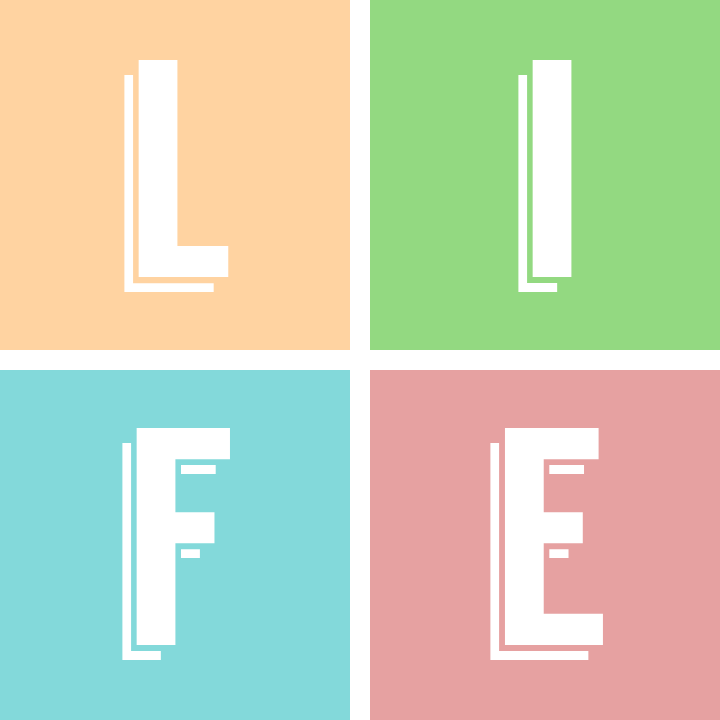
<style>
.page{position:relative;width:720px;height:720px;background:#93d981}
.page>*{position:absolute;margin:0}
.t1{font:310px "Langdon";color:#ffffff}
</style>
<div class="page">
<p class="t1" style="left:124px;top:60px;width:105px;height:232px">l</p>
<p class="t1" style="left:518px;top:60px;width:54px;height:232px">i</p>
<p class="t1" style="left:122px;top:427px;width:108px;height:233px">f</p>
<p class="t1" style="left:490px;top:428px;width:113px;height:232px">e</p>
</div>
